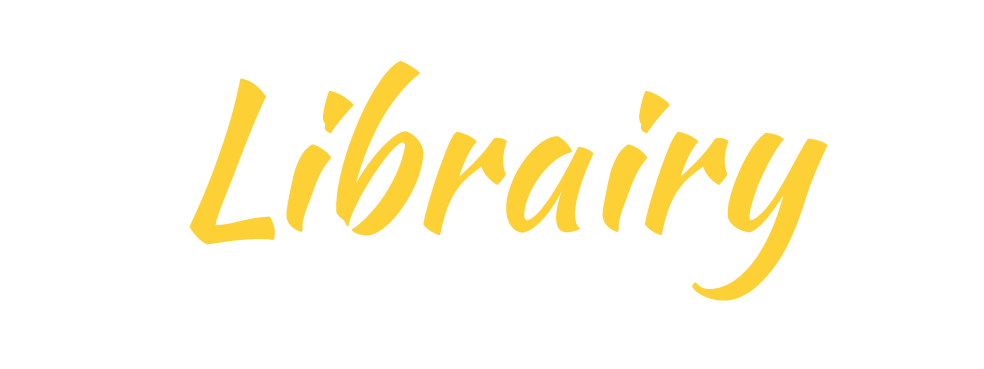
<style>
.page{position:relative;width:984px;height:369px;background:#ffffff}
.page>*{position:absolute;margin:0}
.t1{font:200.5px "KaushanScript-Regular";color:#fed136}
</style>
<div class="page">
<p class="t1" style="left:189px;top:61px;width:639px;height:240px">Librairy</p>
</div>
